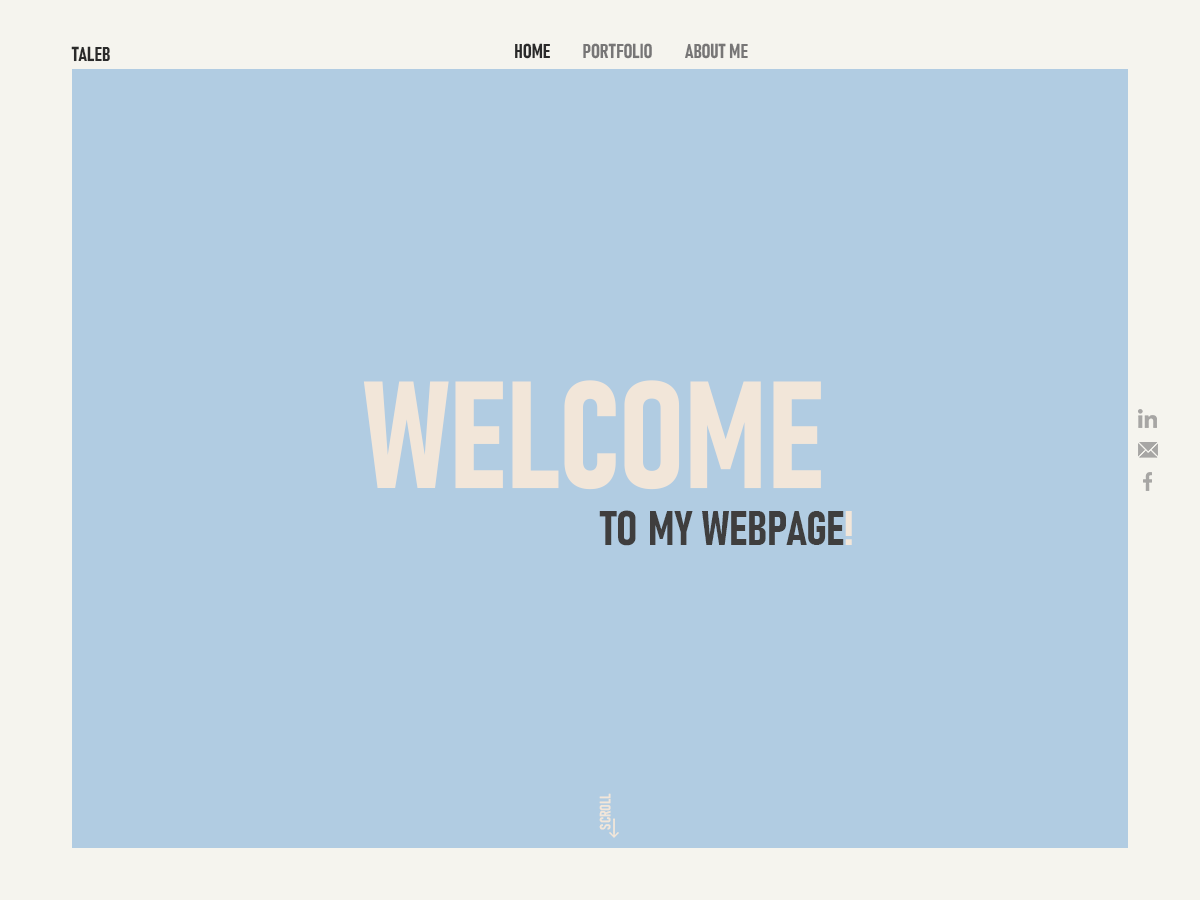
<style>
.page{position:relative;width:1200px;height:900px;background:#b1cce2}
.page>*{position:absolute;margin:0}
.t1{font:20px "Bahnschrift-BoldCondensed";color:#2a2a2a}
.t2{font:20px "Bahnschrift-BoldCondensed";color:#777676}
.t3{font:48px "Bahnschrift-BoldCondensed";color:#3f3e3e}
.t4{font:150px "Bahnschrift-BoldCondensed";color:#f2e6d9}
.t5{font:48px "Bahnschrift-BoldCondensed";color:#f2e6d9}
.t6{font:15px "Bahnschrift-BoldCondensed";color:#f2e6d9}
</style>
<div class="page">
<p class="t1" style="left:71px;top:46px;width:39px;height:16px">TALEB</p>
<p class="t2" style="left:515px;top:43px;width:233px;height:16px"><span class="t1">HOME        </span>PORTFOLIO        ABOUT ME</p>
<p class="t3" style="left:363px;top:380px;width:489px;height:166px"><span class="t4">WELCOME <br></span>TO MY WEBPAGE<span class="t5">!</span></p>
<p class="t6" style="left:599px;top:793px;width:12px;height:37px;rotate:-90deg">SCROLL</p>
</div>
